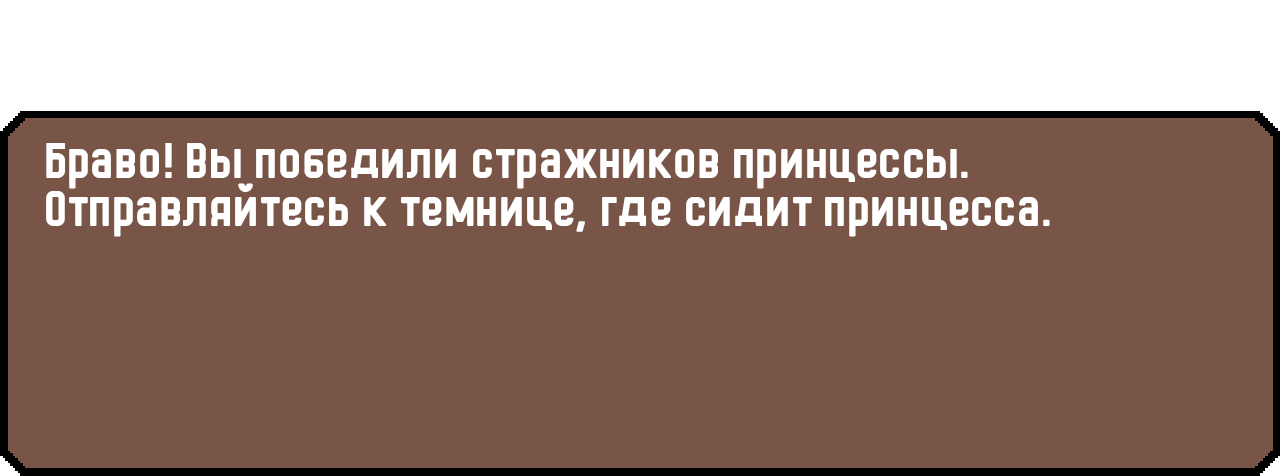
<style>
.page{position:relative;width:1280px;height:476px;background:#795548}
.page>*{position:absolute;margin:0}
.t1{font:48px/48px "HermanoMayor";color:#ffffff}
</style>
<div class="page">
<p class="t1" style="left:46px;top:143px;width:1004px;height:94px">Браво! Вы победили стражников принцессы. Отправляйтесь к темнице, где сидит принцесса.</p>
</div>
